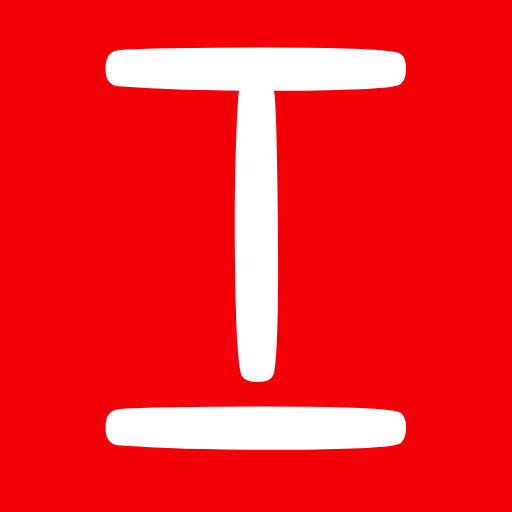
<style>
.page{position:relative;width:512px;height:512px;background:#f40009}
.page>*{position:absolute;margin:0}
.t1{font:500px "YDIGurmL";color:#ffffff}
</style>
<div class="page">
<p class="t1" style="left:105px;top:47px;width:302px;height:45px;rotate:-90deg">I</p>
<p class="t1" style="left:233px;top:81px;width:46px;height:301px">I</p>
<p class="t1" style="left:105px;top:406px;width:302px;height:44px;rotate:-90deg">I</p>
</div>
